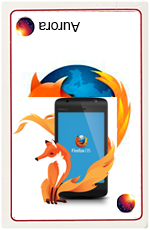
<style>
.page{position:relative;width:150px;height:230px;background:#ffffff}
.page>*{position:absolute;margin:0}
.t1{font:14.4px "ArialMT";letter-spacing:-0.009em;color:#000000}
</style>
<div class="page">
<p class="t1" style="left:39px;top:22px;width:41px;height:10px;rotate:180deg">Aurora</p>
</div>
